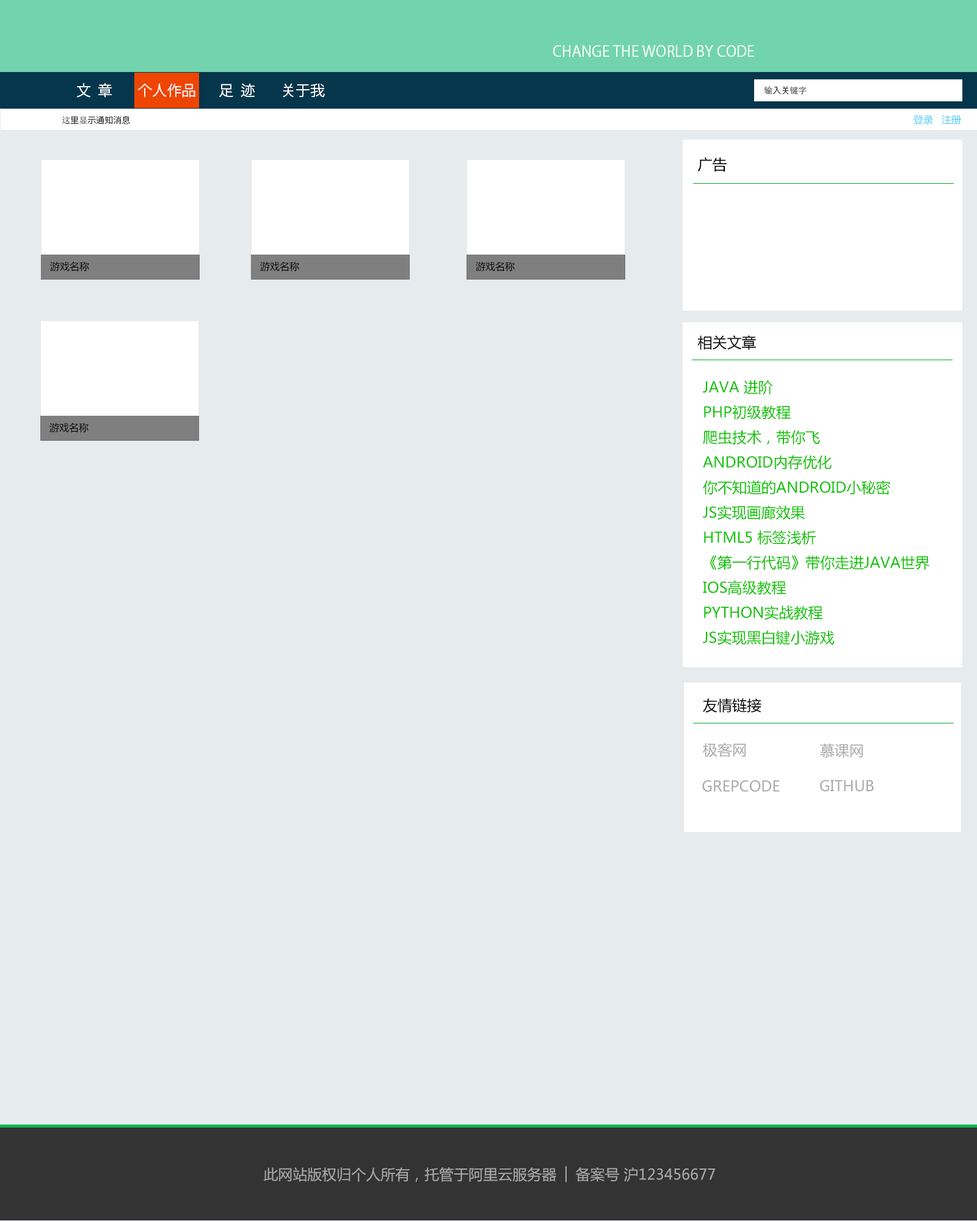
<style>
.page{position:relative;width:977px;height:1221px;background:#e6ebed}
.page>*{position:absolute;margin:0}
.t1{font:14.7px "KozGoPr6N-Regular";color:#ffffff;text-transform:uppercase}
.t2{font:8.5px "KozGoPr6N-Regular";color:#333333;text-transform:uppercase}
.t3{font:8.5px "SimSun";color:#333333;text-transform:uppercase}
.t4{font:9.8px "MicrosoftYaHei";color:#49cef9;text-transform:uppercase}
.t5{font:14.7px "MicrosoftYaHei";color:#000000;text-transform:uppercase}
.t6{font:9.8px "MicrosoftYaHei";color:#000000;text-transform:uppercase}
.t7{font:14.7px/25px "MicrosoftYaHei";color:#0ec300;text-transform:uppercase}
.t8{font:14.7px "MicrosoftYaHei";color:#aaaaaa;text-transform:uppercase}
</style>
<div class="page">
<p class="t1" style="left:553px;top:45px;width:201px;height:12px">change the world by Code</p>
<p class="t1" style="left:76px;top:83px;width:36px;height:15px">文  章</p>
<p class="t1" style="left:137px;top:84px;width:58px;height:14px">个人作品</p>
<p class="t1" style="left:219px;top:84px;width:36px;height:13px">足  迹</p>
<p class="t1" style="left:283px;top:83px;width:42px;height:14px">关于我</p>
<p class="t2" style="left:764px;top:86px;width:42px;height:9px"><span class="t3">输</span>入关<span class="t3">键字</span></p>
<p class="t2" style="left:62px;top:115px;width:69px;height:10px"><span class="t3">这</span>里<span class="t3">显</span>示通知消息</p>
<p class="t4" style="left:913px;top:115px;width:48px;height:10px">登录   注册</p>
<p class="t5" style="left:698px;top:157px;width:28px;height:15px">广告</p>
<p class="t6" style="left:50px;top:261px;width:39px;height:11px">游戏名称</p>
<p class="t6" style="left:260px;top:261px;width:39px;height:11px">游戏名称</p>
<p class="t6" style="left:476px;top:261px;width:39px;height:11px">游戏名称</p>
<p class="t5" style="left:697px;top:335px;width:59px;height:15px">相关文章</p>
<p class="t7" style="left:703px;top:380px;width:227px;height:265px">Java 进阶<br>Php初级教程<br>爬虫技术，带你飞<br>Android内存优化<br>你不知道的Android小秘密<br>Js实现画廊效果<br>HTML5 标签浅析<br>《第一行代码》带你走进java世界<br>IOS高级教程<br>python实战教程<br>JS实现黑白键小游戏</p>
<p class="t6" style="left:49px;top:422px;width:40px;height:11px">游戏名称</p>
<p class="t5" style="left:703px;top:698px;width:58px;height:15px">友情链接</p>
<p class="t8" style="left:703px;top:742px;width:42px;height:15px">极客网</p>
<p class="t8" style="left:820px;top:744px;width:43px;height:14px">慕课网</p>
<p class="t8" style="left:702px;top:780px;width:78px;height:12px">GrepCode</p>
<p class="t8" style="left:820px;top:780px;width:54px;height:12px">Github</p>
<p class="t8" style="left:263px;top:1166px;width:452px;height:16px">此网站版权归个人所有，托管于阿里云服务器 │ 备案号 沪123456677</p>
</div>
